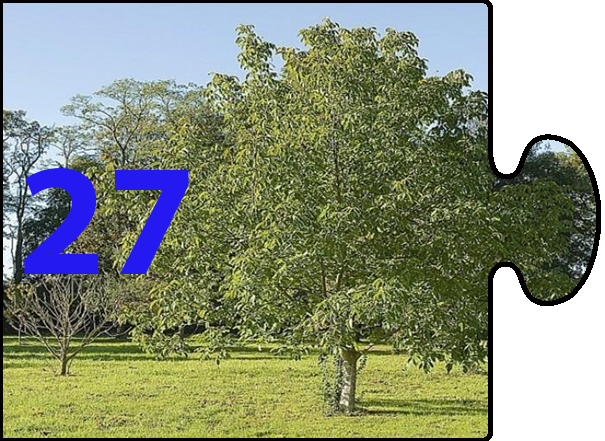
<style>
.page{position:relative;width:605px;height:441px}
.page>*{position:absolute;margin:0}
.t1{font:160px "MyriadPro-Bold";color:#241af1}
</style>
<div class="page">
<p class="t1" style="left:24px;top:168px;width:165px;height:106px">27</p>
</div>
